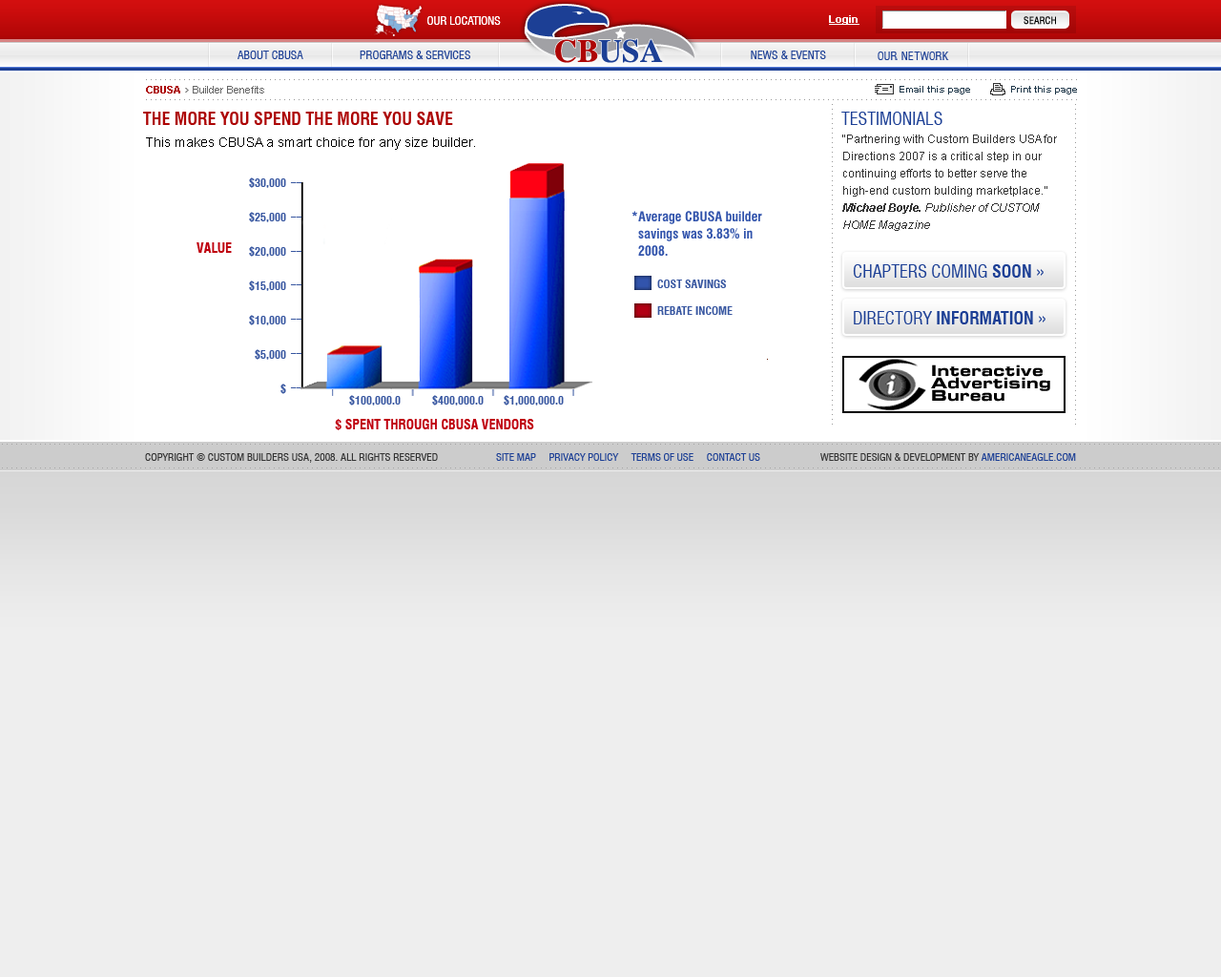
<style>
.page{position:relative;width:1221px;height:977px;background:#eeeeee}
.page>*{position:absolute;margin:0}
.t1{font:11.4px "Swiss721BT-RomanCondensed";letter-spacing:-0.002em;color:#ffffff;text-transform:uppercase}
.t2{font:10.5px "Arial-BoldMT";color:#fffffe;text-decoration:underline}
.t3{font:9.5px "Swiss721BT-RomanCondensed";color:#000000;text-transform:uppercase;font-weight:bold}
.t4{font:10.5px "ArialMT";color:#666666}
.t5{font:10.5px "Arial-BoldMT";color:#ad0505}
.t6{font:9.5px "Arial-BoldMT";color:#1f3749}
.t7{font:17.2px "Swiss721BT-BoldCondensed";color:#ad0505;text-transform:uppercase}
.t8{font:17.2px "Swiss721BT-RomanCondensed";color:#1c3f95;text-transform:uppercase}
.t9{font:13.4px "ArialMT";color:#000000}
.t10{font:11.4px/17.2px "ArialMT";color:#333333}
.t11{font:11.4px/17.2px "Arial-BoldItalicMT";color:#333333}
.t12{font:11.4px/17.2px "Arial-ItalicMT";color:#333333}
.t13{font:10.5px/17.2px "ArialMT";color:#ad0505;text-decoration:underline}
.t14{font:11.4px/17.2px "Swiss721BT-BoldCondensed";color:#3756a0;text-transform:uppercase}
.t15{font:8.8px/17.1px "Swiss721BT-BoldCondensed";color:#3756a0;text-transform:uppercase;scale:1.18 1}
.t16{font:13.4px/17.2px "Swiss721BT-BoldCondensed";color:#3254ac}
.t17{font:11.4px/17.2px "Swiss721BT-BoldCondensed";color:#3254ac}
.t18{font:13.4px "Swiss721BT-BoldCondensed";color:#bf000e;text-transform:uppercase}
.t19{font:17.2px "Swiss721BT-BoldCondensed";color:#1c3f95;text-transform:uppercase}
.t20{font:11.4px "Swiss721BT-BoldCondensed";color:#3756a0;text-transform:uppercase}
.t21{font:10.5px "Swiss721BT-RomanCondensed";color:#333333;text-transform:uppercase}
.t22{font:10.5px "Swiss721BT-RomanCondensed";color:#1c3f95;text-transform:uppercase}
</style>
<div class="page">
<p class="t1" style="left:427px;top:16px;width:74px;height:9px;opacity:0.75">Our Locations</p>
<p class="t1" style="left:427px;top:16px;width:74px;height:9px">Our Locations</p>
<p class="t2" style="left:829px;top:15px;width:30px;height:10px">Login</p>
<p class="t3" style="left:1023px;top:16px;width:33px;height:9px">Search</p>
<p class="t4" style="left:146px;top:86px;width:118px;height:7px"><span class="t5">CBUSA</span>    Builder Benefits</p>
<p class="t6" style="left:899px;top:86px;width:71px;height:8px">Email this page</p>
<p class="t6" style="left:1011px;top:86px;width:66px;height:8px">Print this page</p>
<p class="t7" style="left:143px;top:112px;width:310px;height:13px">the more you spend the more you save</p>
<p class="t8" style="left:841px;top:112px;width:101px;height:13px">Testimonials</p>
<p class="t9" style="left:146px;top:137px;width:329px;height:13px">This makes CBUSA a smart choice for any size builder.</p>
<p class="t10" style="left:842px;top:134px;width:215px;height:97px">“Partnering with Custom Builders USA for Directions 2007 is a critical step in our continuing efforts to better serve the high-end custom bulding marketplace.”<br><span class="t11">Michael Boyle.</span><span class="t12"> Publisher of CUSTOM HOME Magazine<br></span><span class="t13">More Testimonials</span></p>
<p class="t14" style="left:249px;top:177px;width:37px;height:217px;text-align:right">$30,000<br><br>$25,000<br><br>$20,000<br><br> $15,000<br><br>$10,000<br><br>$5,000<br><br>$</p>
<p class="t15" style="left:290px;top:182px;width:12px;height:206px">__<br><br>__<br><br>__<br><br>__<br><br>__<br><br>__<br><br>__</p>
<p class="t16" style="left:631px;top:211px;width:131px;height:45px"><span class="t17"><br><br><br><br><br></span>*Average CBUSA builder      savings was 3.83% in         <br>  2008.</p>
<p class="t18" style="left:196px;top:242px;width:36px;height:11px">VALUE</p>
<p class="t8" style="left:853px;top:264px;width:190px;height:14px">CHAPTERS COMING <span class="t19">SOON </span>»</p>
<p class="t20" style="left:657px;top:279px;width:69px;height:9px">Cost savings</p>
<p class="t20" style="left:657px;top:306px;width:76px;height:9px">rebate income</p>
<p class="t19" style="left:854px;top:311px;width:191px;height:13px"><span class="t8">DIRECTORY </span>INFORMATION<span class="t8"> »</span></p>
<p class="t20" style="left:349px;top:395px;width:215px;height:10px">$100,000.0      $400,000.0       $1,000,000.0</p>
<p class="t18" style="left:335px;top:419px;width:199px;height:11px">$ Spent through cbusa vendors</p>
<p class="t21" style="left:145px;top:453px;width:293px;height:10px">Copyright © Custom Builders USA, 2008. All Rights Reserved</p>
<p class="t22" style="left:496px;top:453px;width:264px;height:8px">Site map     Privacy Policy     Terms of Use     Contact Us</p>
<p class="t21" style="left:820px;top:453px;width:256px;height:8px">Website Design &amp; Development by <span class="t22">Americaneagle.com</span></p>
</div>
